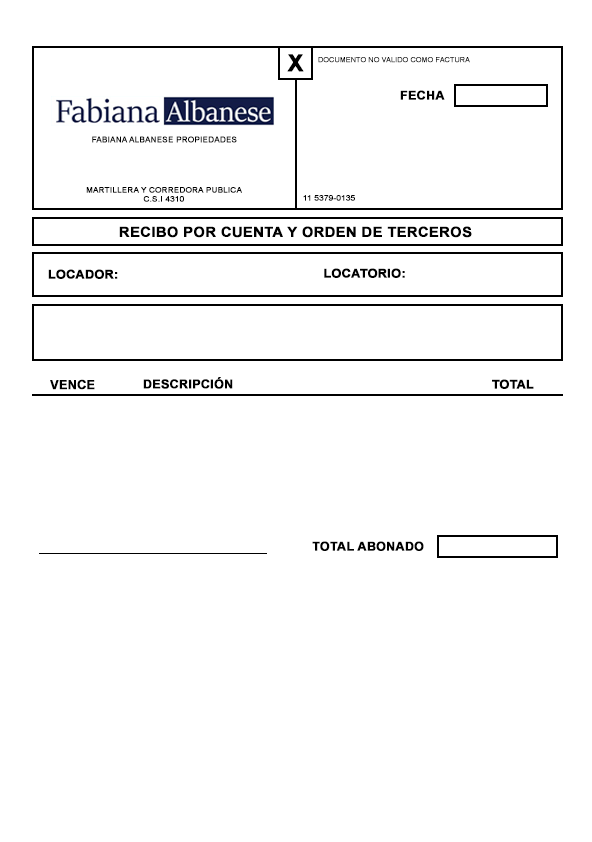
<style>
.page{position:relative;width:592px;height:842px;background:#ffffff}
.page>*{position:absolute;margin:0}
.t1{font:23.5px "Arial-BoldMT";letter-spacing:0.01em;color:#000000;font-weight:bold}
.t2{font:7px "ArialMT";letter-spacing:0.01em;color:#000000;font-weight:bold}
.t3{font:12.2px "Arial-BoldMT";letter-spacing:0.01em;color:#000000;font-weight:bold}
.t4{font:8px "ArialMT";letter-spacing:0.01em;color:#000000;font-weight:bold}
.t5{font:7.6px "ArialMT";letter-spacing:0.01em;color:#000000;font-weight:bold;scale:1.06 1}
.t6{font:7.6px "ArialMT";letter-spacing:0.01em;color:#000000;font-weight:bold;scale:1.05 1}
.t7{font:13.8px "Arial-BoldMT";letter-spacing:0.01em;color:#000000;font-weight:bold;scale:1.05 1}
.t8{font:12px "Arial-BoldMT";letter-spacing:0.01em;color:#000000;font-weight:bold;scale:1.04 1}
.t9{font:12.4px "Arial-BoldMT";letter-spacing:0.01em;color:#000000;font-weight:bold}
.t10{font:12.1px "Arial-BoldMT";letter-spacing:0.01em;color:#000000;font-weight:bold}
</style>
<div class="page">
<p class="t1" style="left:287px;top:54px;width:17px;height:18px">X</p>
<p class="t2" style="left:318px;top:57px;width:152px;height:6px">DOCUMENTO NO VALIDO COMO FACTURA</p>
<p class="t3" style="left:400px;top:90px;width:45px;height:10px">FECHA</p>
<p class="t4" style="left:92px;top:136px;width:145px;height:7px">FABIANA ALBANESE PROPIEDADES</p>
<p class="t5" style="left:86px;top:187px;width:156px;height:15px;text-align:center">MARTILLERA Y CORREDORA PUBLICA<br>C.S.I 4310</p>
<p class="t6" style="left:303px;top:195px;width:52px;height:6px">11 5379-0135</p>
<p class="t7" style="left:119px;top:226px;width:353px;height:12px">RECIBO POR CUENTA Y ORDEN DE TERCEROS</p>
<p class="t8" style="left:48px;top:269px;width:70px;height:10px">LOCADOR:</p>
<p class="t3" style="left:324px;top:268px;width:81px;height:10px">LOCATORIO:</p>
<p class="t3" style="left:143px;top:377px;width:90px;height:12px">DESCRIPCIÓN</p>
<p class="t9" style="left:50px;top:379px;width:45px;height:11px">VENCE</p>
<p class="t10" style="left:492px;top:379px;width:42px;height:10px">TOTAL</p>
<p class="t3" style="left:312px;top:541px;width:112px;height:10px">TOTAL ABONADO</p>
</div>
